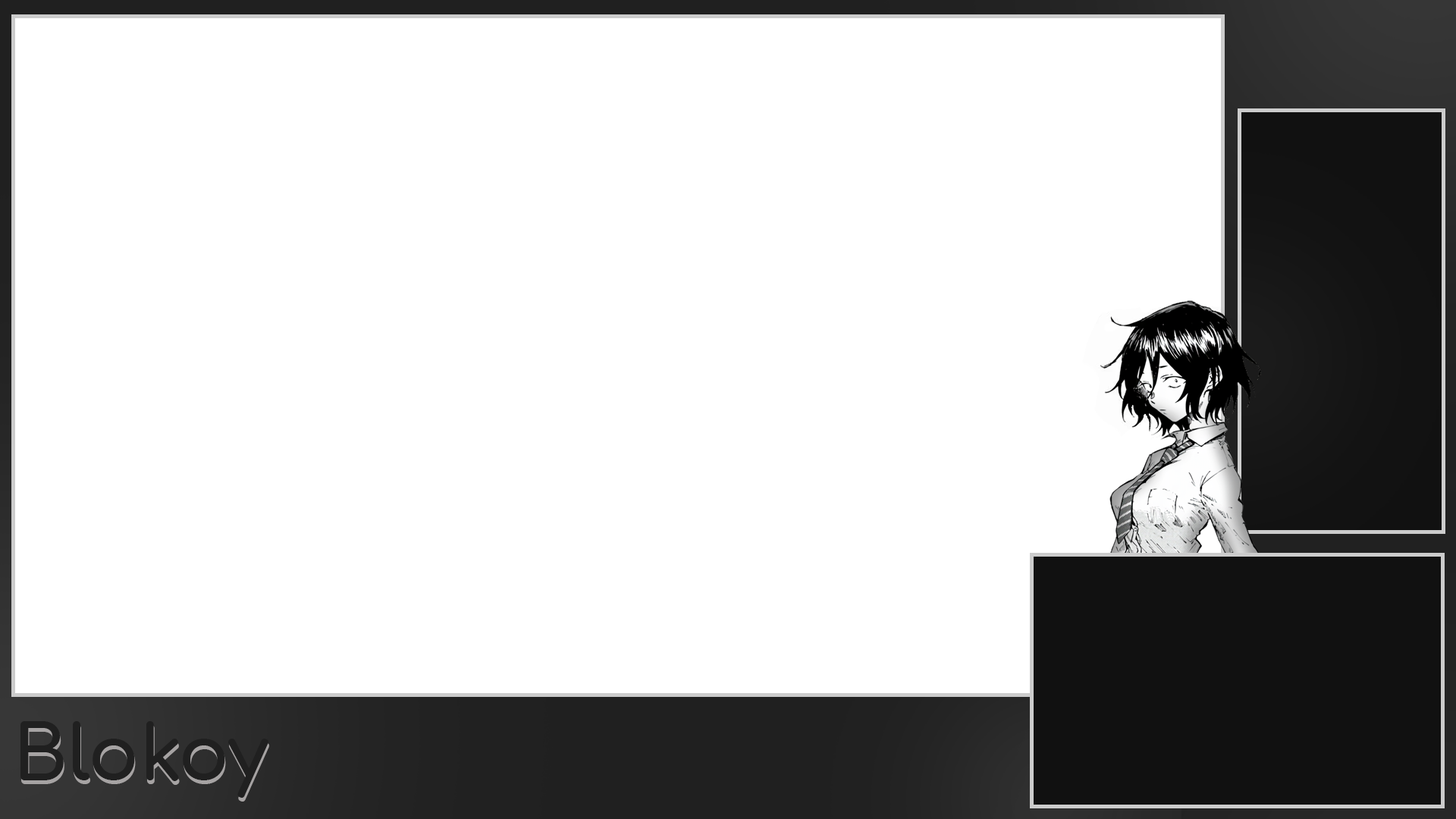
<style>
.page{position:relative;width:1456px;height:819px;background:#ffffff}
.page>*{position:absolute;margin:0}
.t1{font:75.8px "Comfortaa-Bold";color:#202020}
</style>
<div class="page">
<p class="t1" style="left:20px;top:721px;width:248px;height:77px">Blokoy</p>
</div>
